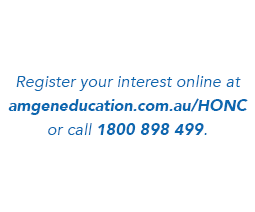
<style>
.page{position:relative;width:255px;height:212px;background:#ffffff}
.page>*{position:absolute;margin:0}
.t1{font:16.5px/24px "Avenir-BookOblique";color:#0c68b0}
.t2{font:16.5px/24px "Avenir-BlackOblique";letter-spacing:-0.02em;color:#0c68b0}
.t3{font:16.5px/24px "Avenir-BlackOblique";color:#0c68b0}
</style>
<div class="page">
<p class="t1" style="left:8px;top:75px;width:240px;height:60px;text-align:center">Register your interest online at <span class="t2">amgeneducation.com.au/HONC <br></span>or call <span class="t3">1800 898 499</span>.</p>
</div>
